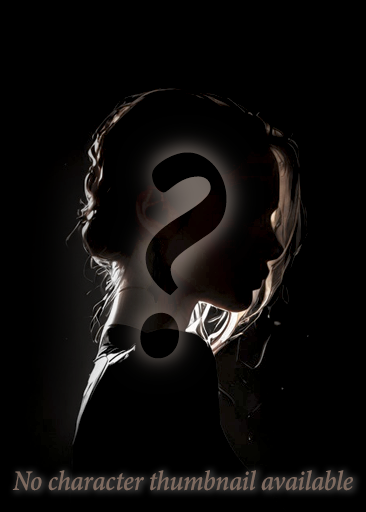
<style>
.page{position:relative;width:366px;height:512px;background:#000000}
.page>*{position:absolute;margin:0}
.t1{font:330px "AdobeDevanagari-BoldItalic";letter-spacing:-0.01em;color:#020000;scale:0.91 1}
.t2{font:30.8px "AdobeDevanagari-BoldItalic";letter-spacing:-0.01em;color:#7e6a5f;scale:0.91 1}
</style>
<div class="page">
<p class="t1" style="left:140px;top:152px;width:87px;height:207px">?</p>
<p class="t2" style="left:12px;top:470px;width:341px;height:21px">No character thumbnail available</p>
</div>
